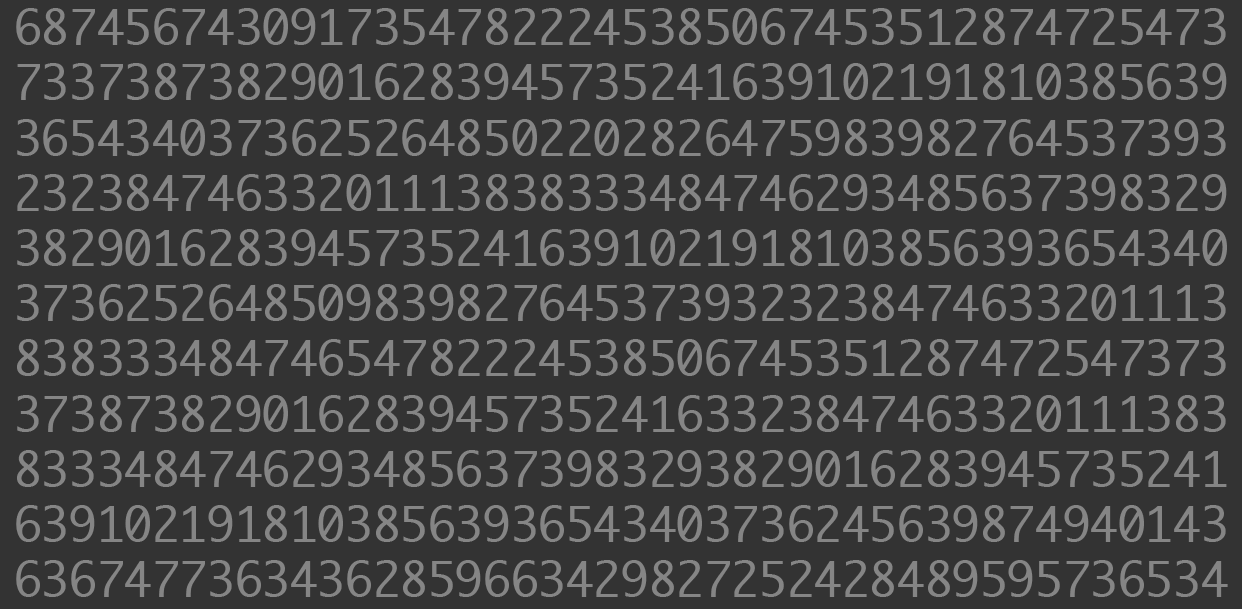
<style>
.page{position:relative;width:1242px;height:609px;background:#333333}
.page>*{position:absolute;margin:0}
.t1{font:46px "Monaco";color:#858585}
</style>
<div class="page">
<p class="t1" style="left:16px;top:8px;width:1212px;height:589px;text-align:center">6874567430917354782224538506745351287472547373373873829016283945735241639102191810385639365434037362526485022028264759839827645373932323847463320111383833348474629348563739832938290162839457352416391021918103856393654340373625264850983982764537393232384746332011138383334847465478222453850674535128747254737337387382901628394573524163323847463320111383833348474629348563739832938290162839457352416391021918103856393654340373624563987494014363674773634362859663429827252428489595736534</p>
</div>
